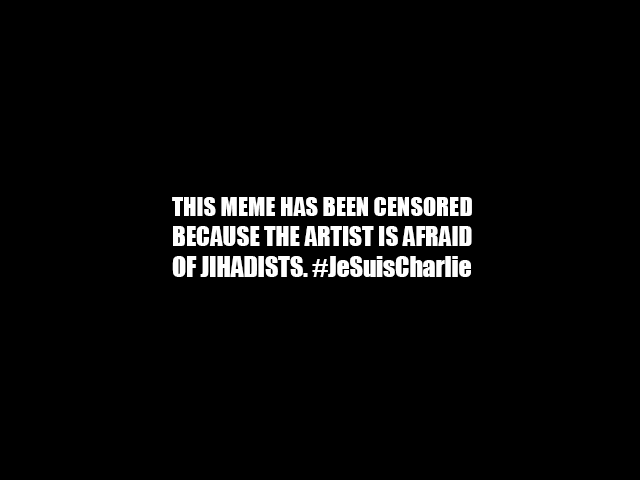
<style>
.page{position:relative;width:640px;height:480px;background:#000000}
.page>*{position:absolute;margin:0}
.t1{font:25px "Impact";color:#ffffff}
.t2{font:24.3px "Impact";color:#ffffff}
.t3{font:25.5px "Impact";color:#ffffff}
</style>
<div class="page">
<p class="t1" style="left:172px;top:197px;width:300px;height:80px"><span class="t2">THIS MEME HAS BEEN CENSORED<br></span>BECAUSE THE ARTIST IS AFRAID<br><span class="t3">OF JIHADISTS. #JeSuisCharlie</span></p>
</div>
